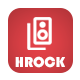
<style>
.page{position:relative;width:80px;height:80px;background:#ffffff}
.page>*{position:absolute;margin:0}
.t1{font:15px "Bauhaus93";color:#ffffff}
</style>
<div class="page">
<p class="t1" style="left:15px;top:56px;width:50px;height:12px">HROCK</p>
</div>
